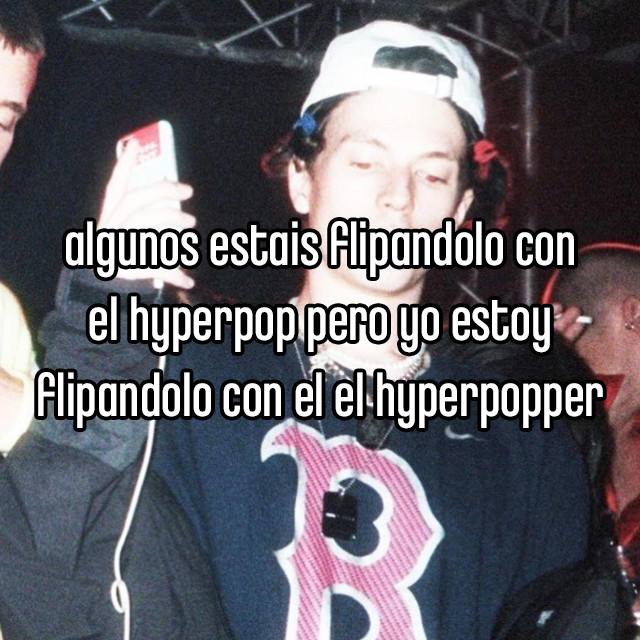
<style>
.page{position:relative;width:640px;height:640px}
.page>*{position:absolute;margin:0}
.t1{font:62.8px "ChaletComprime-CologneEighty";color:#ffffff}
</style>
<div class="page">
<p class="t1" style="left:38px;top:221px;width:565px;height:208px;text-align:center">algunos estais flipandolo con<br>el hyperpop pero yo estoy<br>flipandolo con el el hyperpopper</p>
</div>
